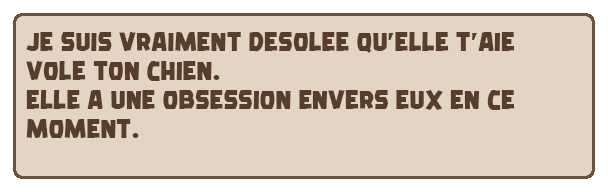
<style>
.page{position:relative;width:608px;height:192px;background:#e3d4c3}
.page>*{position:absolute;margin:0}
.t1{font:24.2px "Golden-Smile";color:#573e2b}
</style>
<div class="page">
<p class="t1" style="left:26px;top:32px;width:489px;height:106px">Je suis vraiment desolee qu’elle t’aie<br>vole ton chien.<br>Elle a une obsession envers eux en ce <br>moment.</p>
</div>
